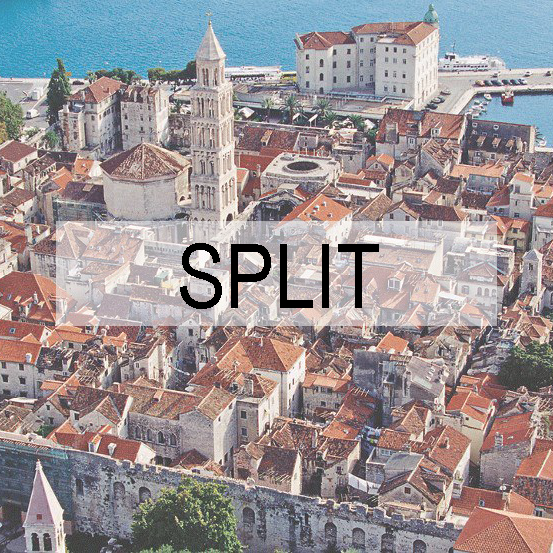
<style>
.page{position:relative;width:553px;height:553px}
.page>*{position:absolute;margin:0}
.t1{font:90px "ArialNarrow";color:#000000}
</style>
<div class="page">
<p class="t1" style="left:180px;top:243px;width:199px;height:66px">SPLIT</p>
</div>
